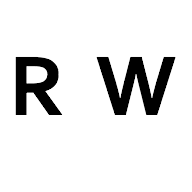
<style>
.page{position:relative;width:192px;height:192px;background:#ffffff}
.page>*{position:absolute;margin:0}
.t1{font:88px "Corbel-Bold";color:#000000}
</style>
<div class="page">
<p class="t1" style="left:15px;top:56px;width:161px;height:59px">R  W</p>
</div>
